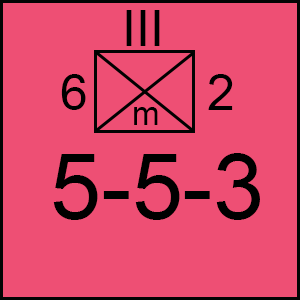
<style>
.page{position:relative;width:300px;height:300px;background:#ee4f74}
.page>*{position:absolute;margin:0}
.t1{font:50px "ArialMT";color:#000000}
.t2{font:33.3px "ArialMT";color:#000000}
.t3{font:91.7px "ArialMT";color:#000000}
</style>
<div class="page">
<p class="t1" style="left:126px;top:10px;width:34px;height:36px">III</p>
<p class="t1" style="left:61px;top:74px;width:25px;height:36px">6</p>
<p class="t1" style="left:208px;top:74px;width:25px;height:36px">2</p>
<p class="t2" style="left:134px;top:107px;width:24px;height:18px">m</p>
<p class="t3" style="left:53px;top:153px;width:207px;height:67px">5-5-3</p>
</div>
